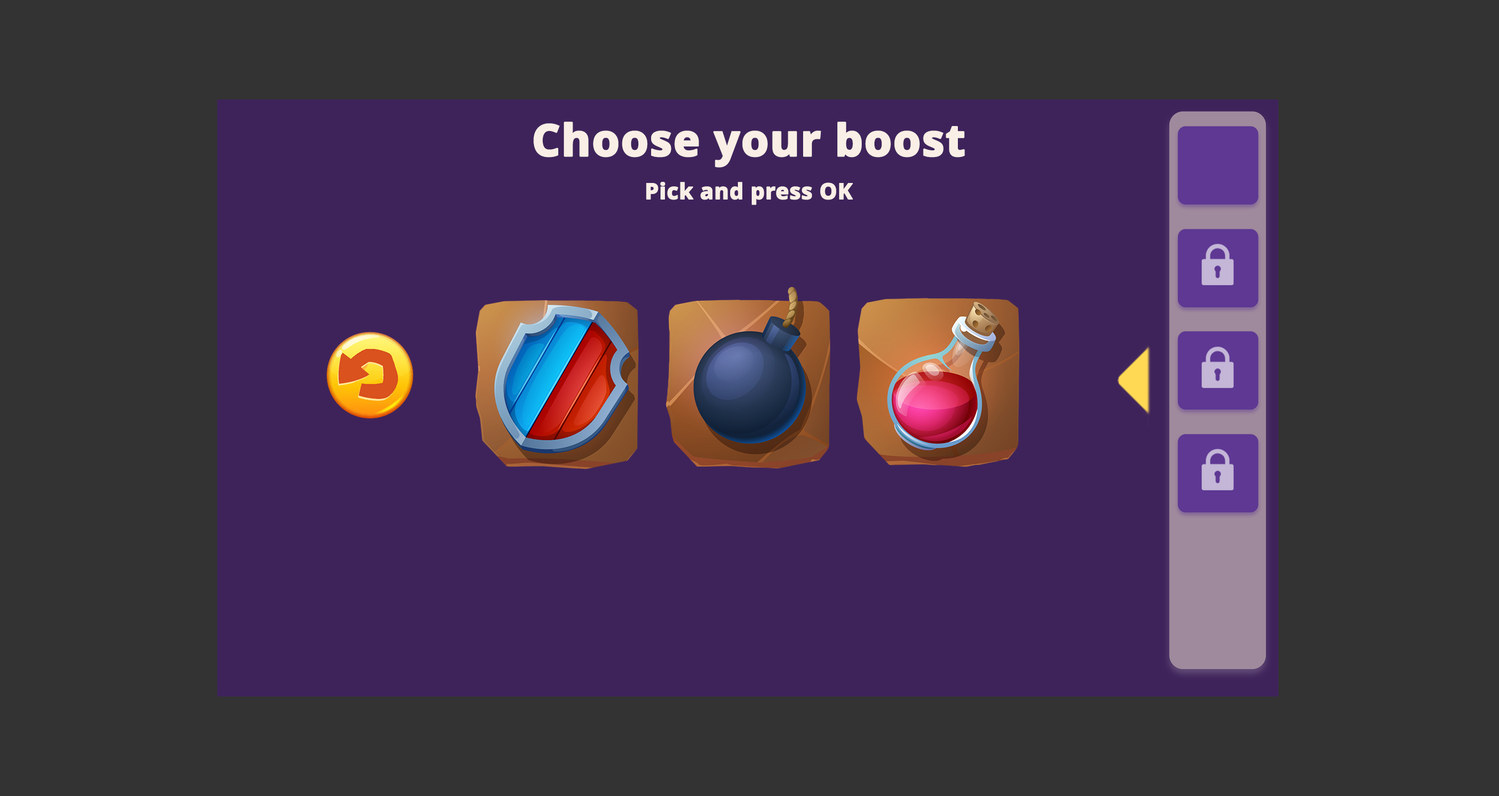
<style>
.page{position:relative;width:1499px;height:796px;background:#333333}
.page>*{position:absolute;margin:0}
.t1{font:44.2px "NotoSans-ExtraBold";color:#faefe6;font-weight:bold}
.t2{font:22.1px "NotoSans-ExtraBold";color:#faefe6;font-weight:bold}
</style>
<div class="page">
<p class="t1" style="left:533px;top:122px;width:432px;height:45px">Choose your boost</p>
<p class="t2" style="left:646px;top:182px;width:207px;height:23px">Pick and press OK</p>
</div>
